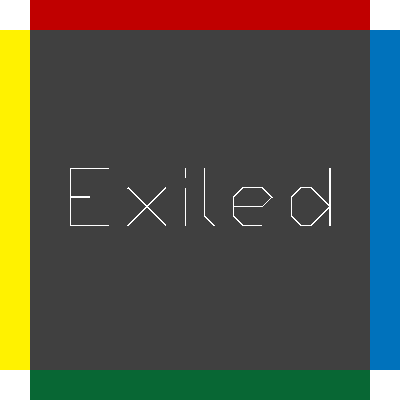
<style>
.page{position:relative;width:400px;height:400px;background:#404040}
.page>*{position:absolute;margin:0}
.t1{font:80px "Txt";color:#ffffff}
</style>
<div class="page">
<p class="t1" style="left:70px;top:168px;width:261px;height:58px">Exiled</p>
</div>
